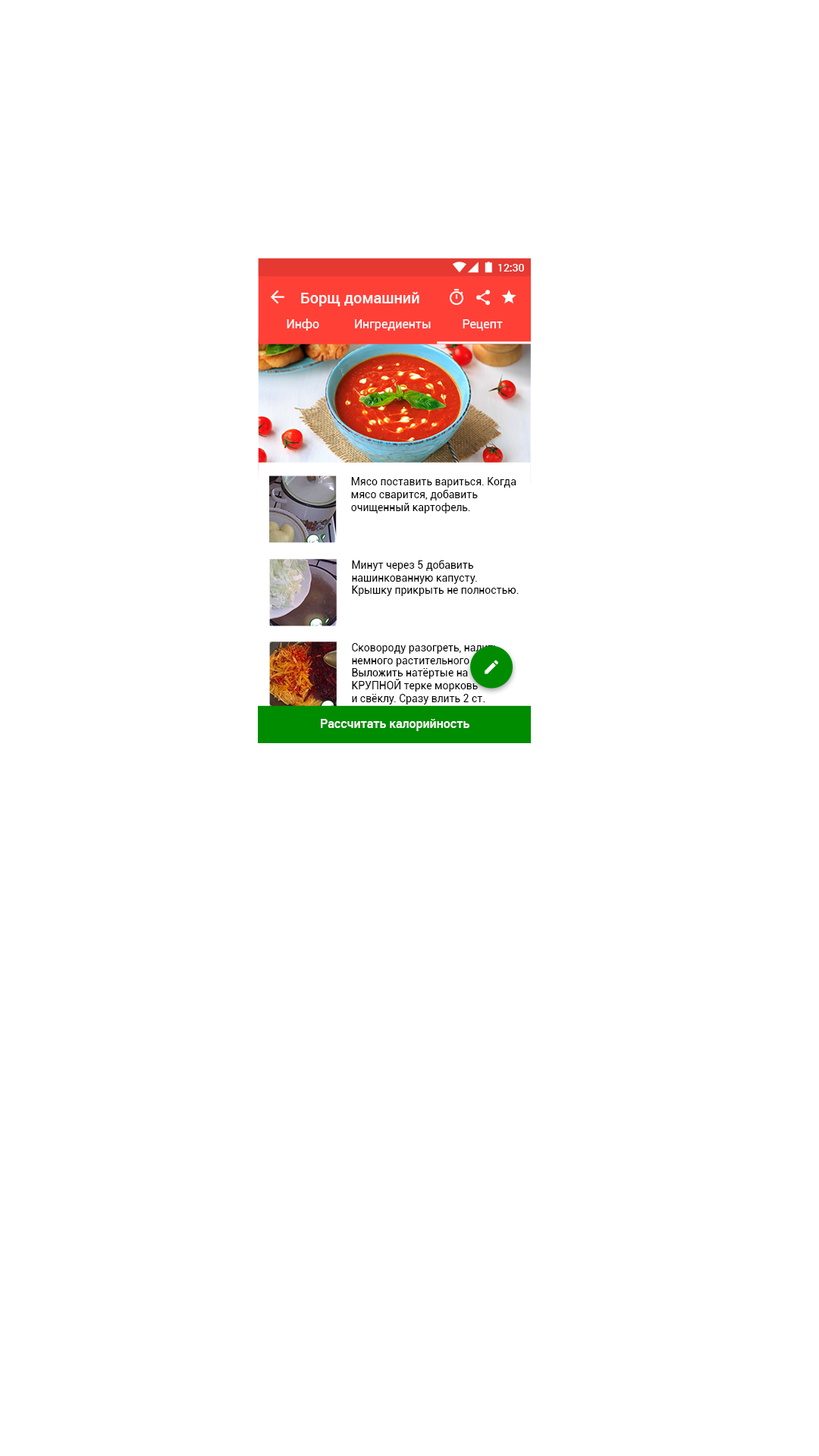
<style>
.page{position:relative;width:819px;height:1456px;background:#ffffff}
.page>*{position:absolute;margin:0}
.t1{font:10.6px "Roboto-Medium";color:#ffffff}
.t2{font:15.1px "Roboto-Medium";color:#ffffff}
.t3{font:12.1px "Roboto-Regular";color:#ffffff}
.t4{font:10.6px "Roboto-Regular";color:#000000}
.t5{font:10.6px "Roboto-Regular"}
.t6{font:12.1px "Roboto-Medium";color:#ffffff}
</style>
<div class="page">
<p class="t1" style="left:498px;top:264px;width:26px;height:7px">12:30</p>
<p class="t2" style="left:301px;top:292px;width:118px;height:14px">Борщ домашний</p>
<p class="t3" style="left:287px;top:318px;width:32px;height:13px">Инфо</p>
<p class="t3" style="left:355px;top:319px;width:76px;height:12px">Ингредиенты</p>
<p class="t3" style="left:463px;top:319px;width:40px;height:12px">Рецепт</p>
<p class="t4" style="left:351px;top:477px;width:165px;height:36px">Мясо поставить вариться. Когда <br>мясо сварится, добавить <br>очищенный картофель.</p>
<p class="t4" style="left:352px;top:560px;width:167px;height:36px">Минут через 5 добавить <br>нашинкованную капусту. <br>Крышку прикрыть не полностью.</p>
<p class="t5" style="left:351px;top:643px;width:155px;height:99px">Сковороду разогреть, налить <br>немного растительного масла. <br>Выложить натёртые на <br>КРУПНОЙ терке морковь <br>и свёклу. Сразу влить 2 ст. <br>л. уксуса (если используется <br>эссенция,то нужно разбавить) <br>и 1 ст. л. сахара.</p>
<p class="t6" style="left:321px;top:719px;width:148px;height:12px">Рассчитать калорийность</p>
</div>
